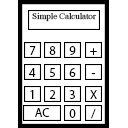
<style>
.page{position:relative;width:128px;height:128px;background:#ffffff}
.page>*{position:absolute;margin:0}
.t1{font:8.8px "MongolianBaiti"}
.t2{font:12.5px "MyriadPro-Regular";color:#000000}
.t3{font:12.5px "MyriadPro-Regular"}
</style>
<div class="page">
<p class="t1" style="left:32px;top:12px;width:64px;height:10px">Simple Calculator</p>
<p class="t2" style="left:30px;top:46px;width:6px;height:9px">7</p>
<p class="t2" style="left:49px;top:46px;width:7px;height:9px">8</p>
<p class="t2" style="left:69px;top:46px;width:7px;height:9px">9</p>
<p class="t2" style="left:90px;top:48px;width:7px;height:7px">+</p>
<p class="t2" style="left:29px;top:68px;width:7px;height:9px">4</p>
<p class="t2" style="left:49px;top:68px;width:6px;height:9px">5</p>
<p class="t2" style="left:69px;top:68px;width:7px;height:9px">6</p>
<p class="t2" style="left:91px;top:73px;width:4px;height:2px">-</p>
<p class="t2" style="left:30px;top:90px;width:4px;height:9px">1</p>
<p class="t2" style="left:49px;top:90px;width:7px;height:9px">2</p>
<p class="t2" style="left:69px;top:90px;width:6px;height:9px">3</p>
<p class="t2" style="left:90px;top:90px;width:7px;height:9px">X</p>
<p class="t2" style="left:35px;top:108px;width:15px;height:9px">AC</p>
<p class="t2" style="left:69px;top:109px;width:7px;height:9px">0</p>
<p class="t3" style="left:91px;top:109px;width:5px;height:10px">/</p>
</div>
